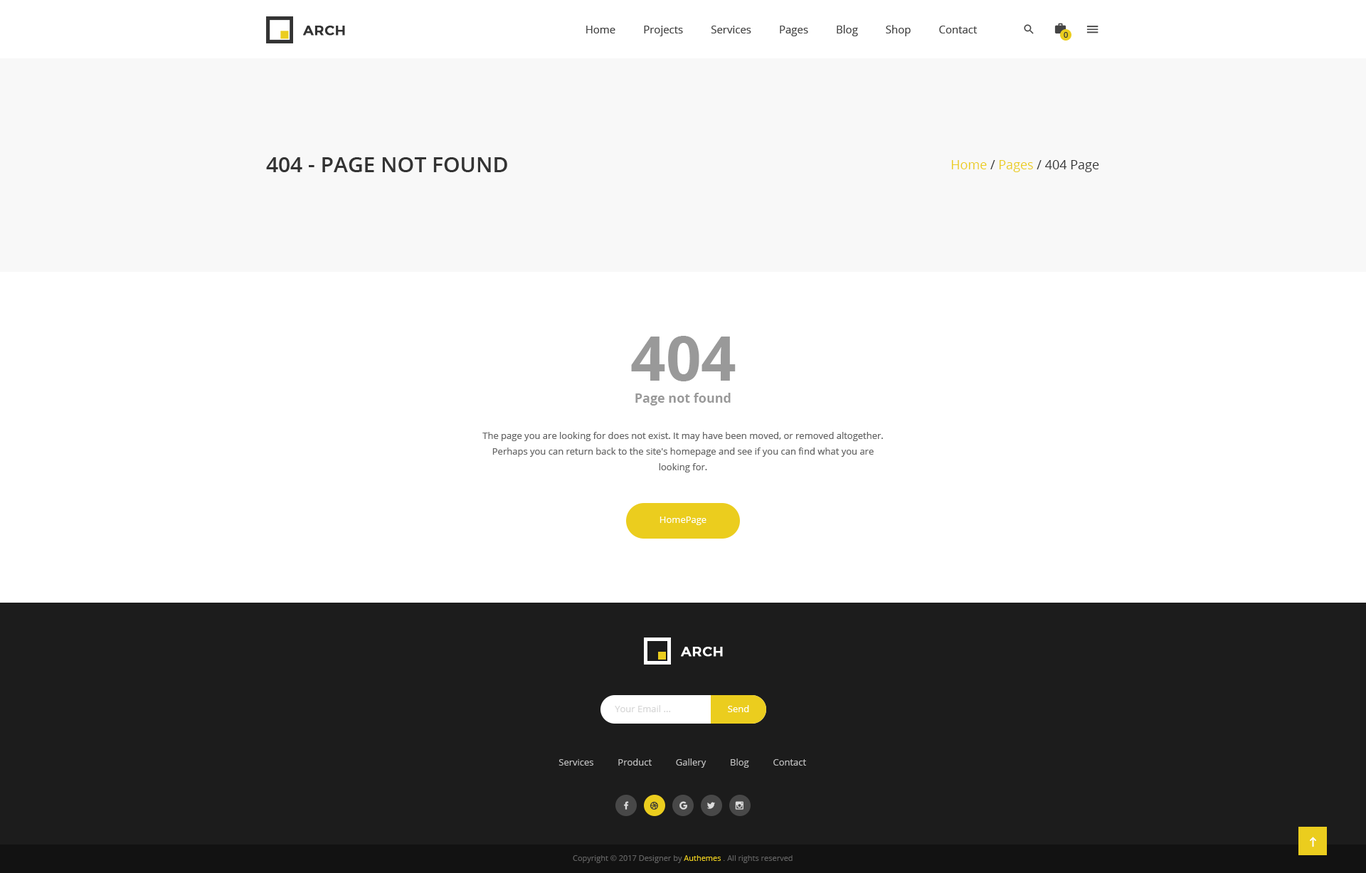
<style>
.page{position:relative;width:1366px;height:873px;background:#ffffff}
.page>*{position:absolute;margin:0}
.t1{font:13.5px "Montserrat-Medium";letter-spacing:0.025em;color:#333333;text-transform:uppercase;font-weight:bold}
.t2{font:10.7px "OpenSans";color:#444444}
.t3{font:7.8px "OpenSans";color:#333333}
.t4{font:21.3px "OpenSans-Semibold";color:#333333;text-transform:uppercase}
.t5{font:12.8px "OpenSans-Regular";color:#333333}
.t6{font:12.8px "OpenSans-Regular";color:#ebcd1e}
.t7{font:61.6px "OpenSans-Bold";color:#999999}
.t8{font:12.8px "OpenSans-Bold";color:#999999}
.t9{font:9.2px/15.7px "OpenSans";color:#666666}
.t10{font:9.2px "OpenSans";color:#ffffff}
.t11{font:13.5px "Montserrat-Medium";letter-spacing:0.025em;color:#ffffff;text-transform:uppercase;font-weight:bold}
.t12{font:9.2px "OpenSans";color:#d6d6d6}
.t13{font:9.2px "OpenSans";color:#c2c2c2}
.t14{font:7.8px "OpenSans";color:#626262}
.t15{font:7.8px "OpenSans";color:#ebcd1e}
</style>
<div class="page">
<p class="t1" style="left:303px;top:26px;width:42px;height:10px">arch</p>
<p class="t2" style="left:586px;top:25px;width:392px;height:11px">Home          Projects          Services          Pages          Blog          Shop          Contact</p>
<p class="t3" style="left:1064px;top:32px;width:4px;height:6px">0</p>
<p class="t4" style="left:266px;top:157px;width:241px;height:15px">404 - page not found</p>
<p class="t5" style="left:951px;top:160px;width:148px;height:12px"><span class="t6">Home </span>/<span class="t6"> Pages</span> / 404 Page</p>
<p class="t7" style="left:631px;top:336px;width:105px;height:45px">404</p>
<p class="t8" style="left:635px;top:393px;width:96px;height:13px">Page not found</p>
<p class="t9" style="left:482px;top:432px;width:401px;height:40px;text-align:center">The page you are looking for does not exist. It may have been moved, or removed altogether. Perhaps you can return back to the site's homepage and see if you can find what you are looking for.</p>
<p class="t10" style="left:660px;top:517px;width:46px;height:8px">HomePage</p>
<p class="t11" style="left:681px;top:647px;width:42px;height:10px">arch</p>
<p class="t12" style="left:615px;top:705px;width:56px;height:7px">Your Email ...</p>
<p class="t10" style="left:728px;top:705px;width:21px;height:7px">Send</p>
<p class="t13" style="left:558px;top:758px;width:248px;height:10px">Services          Product          Gallery          Blog          Contact</p>
<p class="t14" style="left:573px;top:855px;width:220px;height:8px">Copyright © 2017 Designer by <span class="t15">Authemes </span>. All rights reserved</p>
</div>
